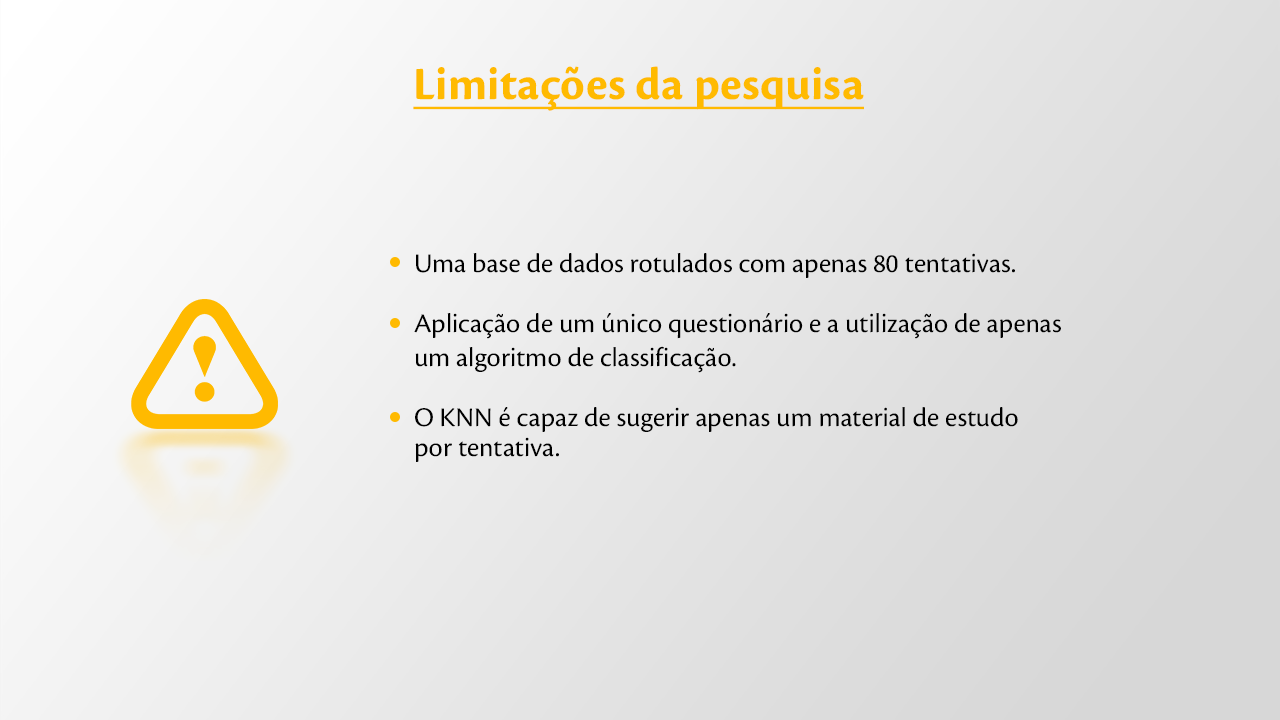
<style>
.page{position:relative;width:1280px;height:720px}
.page>*{position:absolute;margin:0}
.t1{font:48px "CronosPro-Bold";color:#ffba00;text-decoration:underline}
.t2{font:28px/30px "CronosPro-Regular";color:#000000}
.t3{font:28px "CronosPro-Regular";color:#000000}
</style>
<div class="page">
<p class="t1" style="left:413px;top:66px;width:451px;height:45px">Limitações da pesquisa</p>
<p class="t2" style="left:414px;top:253px;width:647px;height:209px">Uma base de dados rotulados com apenas 80 tentativas.<br><br>Aplicação de um único questionário e a utilização de apenas <br>um <span class="t3">alg</span>oritmo de classificação.<br><br>O KNN é capaz de sugerir apenas um material de estudo <br>por tentativa.</p>
</div>
